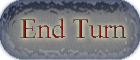
<style>
.page{position:relative;width:140px;height:60px}
.page>*{position:absolute;margin:0}
.t1{font:36px "Kokila"}
</style>
<div class="page">
<p class="t1" style="left:20px;top:18px;width:106px;height:20px">End Turn</p>
</div>
